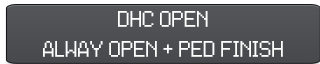
<style>
.page{position:relative;width:320px;height:64px}
.page>*{position:absolute;margin:0}
.t1{font:18px "ZeldaOracles";color:#ffffff}
</style>
<div class="page">
<p class="t1" style="left:43px;top:11px;width:240px;height:46px;text-align:center">DHC OPEN<br>ALWAY OPEN + PED FINISH</p>
</div>
